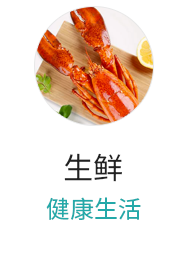
<style>
.page{position:relative;width:188px;height:266px;background:#ffffff}
.page>*{position:absolute;margin:0}
.t1{font:30px "SourceHanSansCN-Regular";color:#222222}
.t2{font:24px "SourceHanSansCN-Regular";color:#24a9a9}
</style>
<div class="page">
<p class="t1" style="left:64px;top:153px;width:58px;height:29px">生鲜</p>
<p class="t2" style="left:46px;top:197px;width:95px;height:23px">健康生活</p>
</div>
